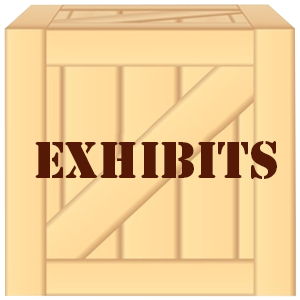
<style>
.page{position:relative;width:300px;height:300px}
.page>*{position:absolute;margin:0}
.t1{font:48px "StencilStd";color:#551905}
</style>
<div class="page">
<p class="t1" style="left:35px;top:141px;width:242px;height:38px">ExHibits</p>
</div>
